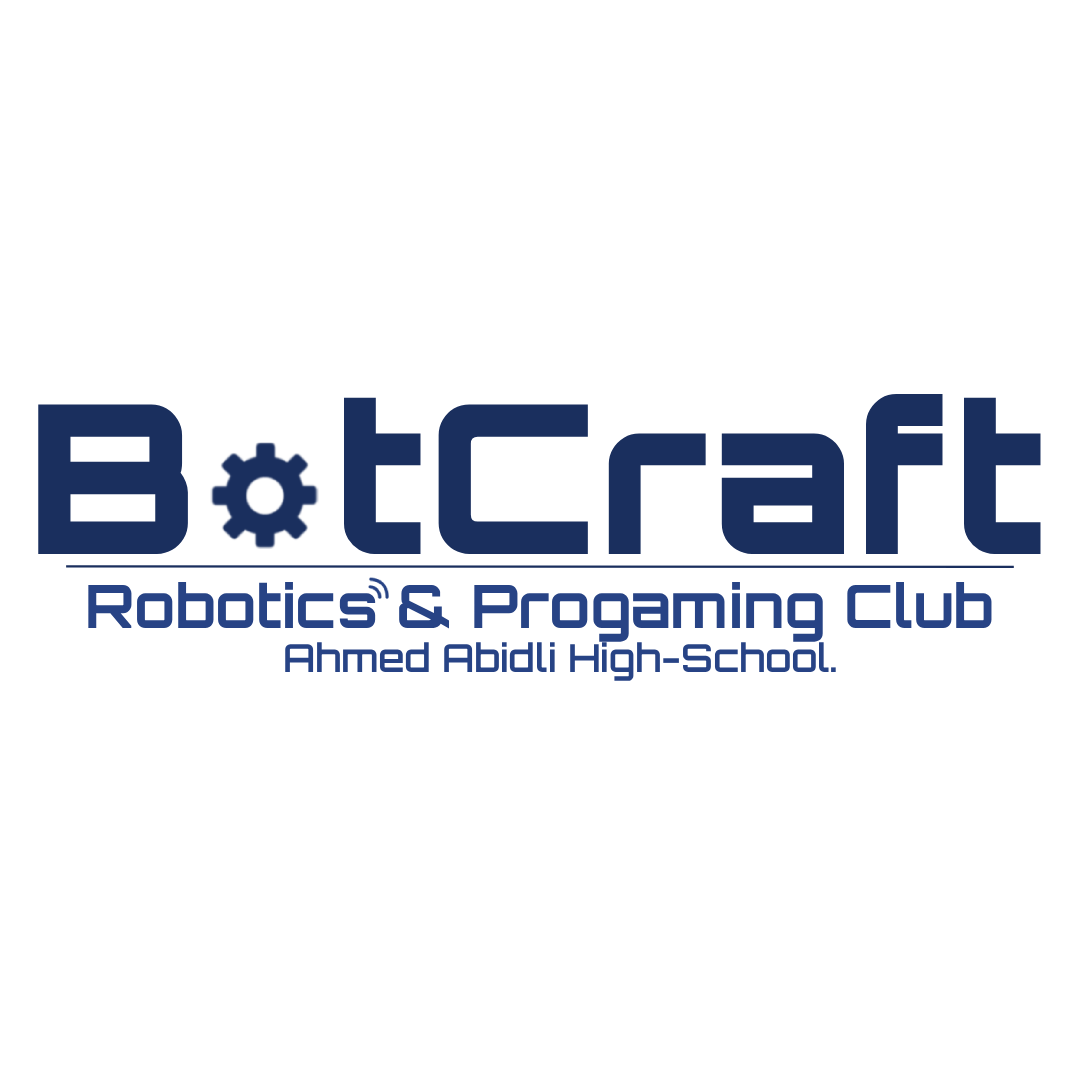
<style>
.page{position:relative;width:1080px;height:1080px;background:#ffffff}
.page>*{position:absolute;margin:0}
.t1{font:207.8px "Orbitron-Black";color:#1a2f5e}
.t2{font:59.8px "Orbitron-Bold";color:#274385}
.t3{font:38.7px "Orbitron-SemiBold";color:#274385}
.t4{font:38.7px "Orbitron-Bold";color:#274385}
</style>
<div class="page">
<p class="t1" style="left:38px;top:394px;width:1003px;height:160px">B  tCraft</p>
<p class="t2" style="left:88px;top:582px;width:904px;height:60px">Robotics &amp; Progaming Club</p>
<p class="t3" style="left:285px;top:642px;width:551px;height:39px"><span class="t4"><br>             </span>Ahmed Abidli High-School.</p>
</div>
